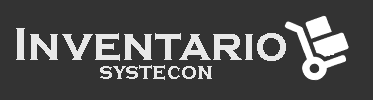
<style>
.page{position:relative;width:373px;height:100px;background:#333333}
.page>*{position:absolute;margin:0}
.t1{font:46.8px "CopperplateGothic-Bold";letter-spacing:-0.007em;color:#e8e8e8}
.t2{font:23.1px "CopperplateGothic-Bold";letter-spacing:-0.007em;color:#e8e8e8;scale:0.96 1}
</style>
<div class="page">
<p class="t1" style="left:16px;top:28px;width:270px;height:33px">Inventario</p>
<p class="t2" style="left:100px;top:65px;width:112px;height:15px">systecon</p>
</div>
